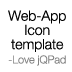
<style>
.page{position:relative;width:72px;height:72px;background:#ffffff}
.page>*{position:absolute;margin:0}
.t1{font:14.2px/14.2px "HelveticaNeue-Light";letter-spacing:-0.01em;color:#000000}
.t2{font:11px/14.2px "HelveticaNeue-Light";letter-spacing:-0.01em;color:#838383}
</style>
<div class="page">
<p class="t1" style="left:8px;top:10px;width:58px;height:56px;text-align:center">Web-App<br>Icon<br>template<br><span class="t2">-Love jQPad</span></p>
</div>
